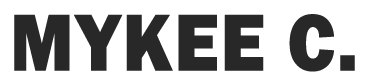
<style>
.page{position:relative;width:367px;height:79px;background:#ffffff}
.page>*{position:absolute;margin:0}
.t1{font:83.3px "FranklinGothic-Heavy";color:#282828;text-transform:uppercase;font-weight:bold;scale:0.91 1}
</style>
<div class="page">
<p class="t1" style="left:14px;top:14px;width:341px;height:58px">mykee c.</p>
</div>
